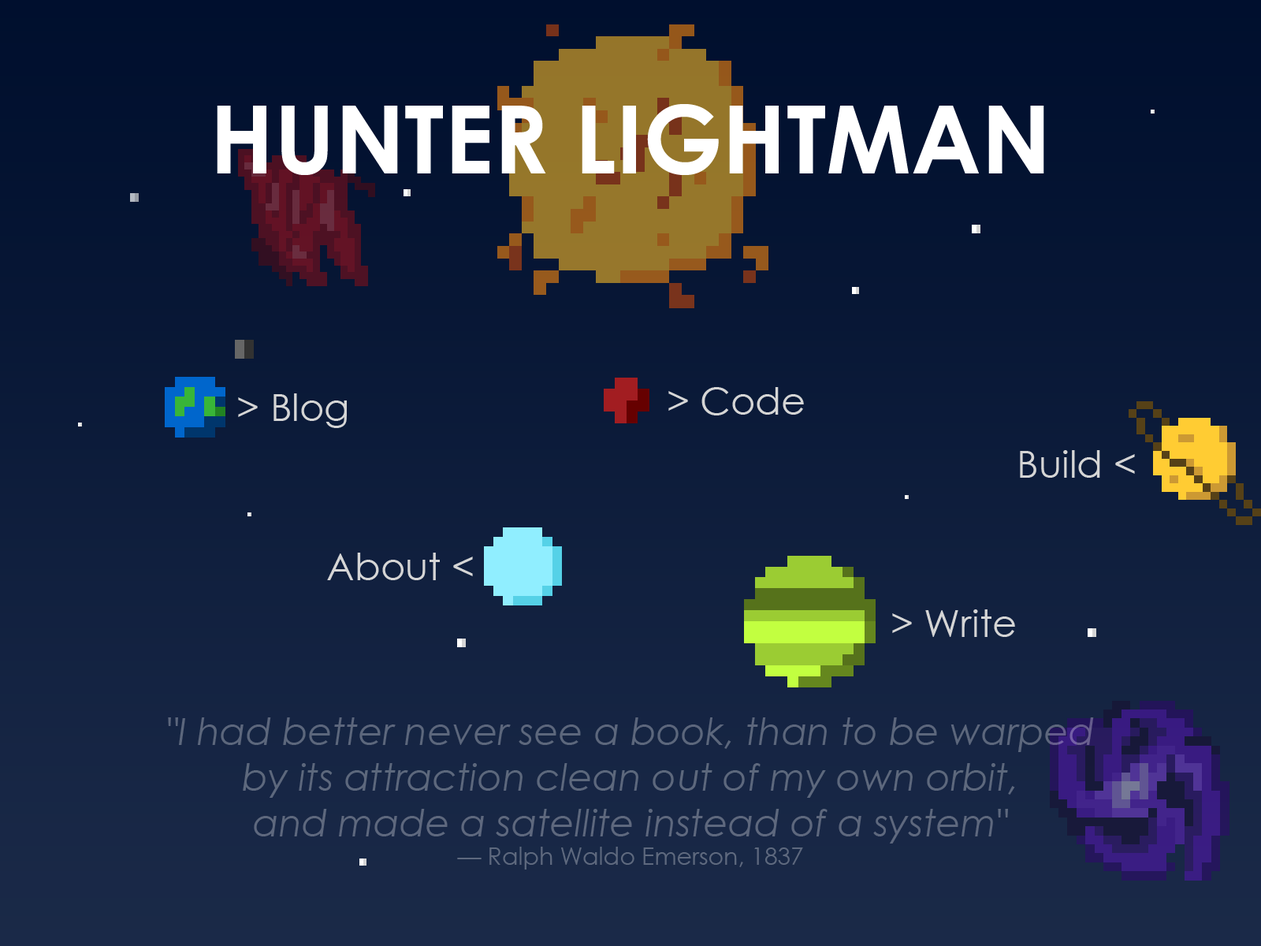
<style>
.page{position:relative;width:1261px;height:946px}
.page>*{position:absolute;margin:0}
.t1{font:94.6px "CenturyGothic-Bold";color:#ffffff}
.t2{font:37.8px "CenturyGothic";color:#d5d5d5}
.t3{font:37.8px "CenturyGothic-Italic";color:#5d687c}
.t4{font:23.6px "CenturyGothic";color:#5d687c}
</style>
<div class="page">
<p class="t1" style="left:217px;top:104px;width:827px;height:71px">HUNTER LIGHTMAN</p>
<p class="t2" style="left:668px;top:387px;width:136px;height:28px">&gt; Code</p>
<p class="t2" style="left:238px;top:393px;width:109px;height:35px">&gt; Blog</p>
<p class="t2" style="left:1020px;top:450px;width:115px;height:28px">Build &lt;</p>
<p class="t2" style="left:327px;top:552px;width:146px;height:28px">About &lt;</p>
<p class="t2" style="left:892px;top:609px;width:123px;height:28px">&gt; Write</p>
<p class="t3" style="left:168px;top:717px;width:926px;height:152px;text-align:center">"I had better never see a book, than to be warped <br>by its attraction clean out of my own orbit, <br>and made a satellite instead of a system"<br><span class="t4">— Ralph Waldo Emerson, 1837</span></p>
</div>
